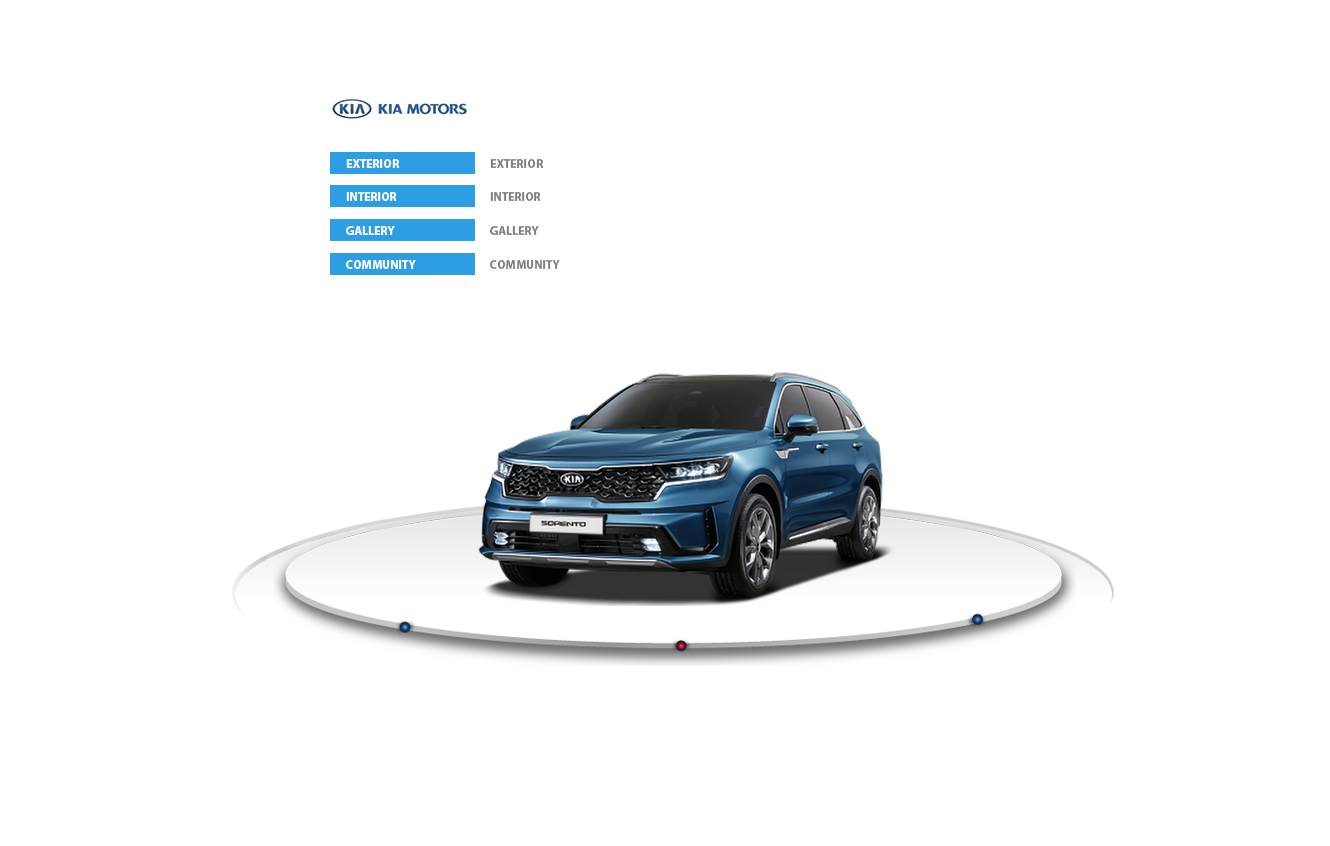
<style>
.page{position:relative;width:1330px;height:846px;background:#ffffff}
.page>*{position:absolute;margin:0}
.t1{font:12px "MyriadPro-Bold";color:#ffffff}
.t2{font:12px "MyriadPro-Bold";color:#7e7d7d}
</style>
<div class="page">
<p class="t1" style="left:346px;top:159px;width:54px;height:9px">EXTERIOR</p>
<p class="t2" style="left:490px;top:159px;width:54px;height:9px">EXTERIOR</p>
<p class="t1" style="left:346px;top:192px;width:51px;height:9px">INTERIOR</p>
<p class="t2" style="left:490px;top:192px;width:51px;height:9px">INTERIOR</p>
<p class="t1" style="left:346px;top:226px;width:49px;height:9px">GALLERY</p>
<p class="t2" style="left:490px;top:226px;width:49px;height:9px">GALLERY</p>
<p class="t1" style="left:346px;top:260px;width:70px;height:9px">COMMUNITY</p>
<p class="t2" style="left:490px;top:260px;width:70px;height:9px">COMMUNITY</p>
</div>
